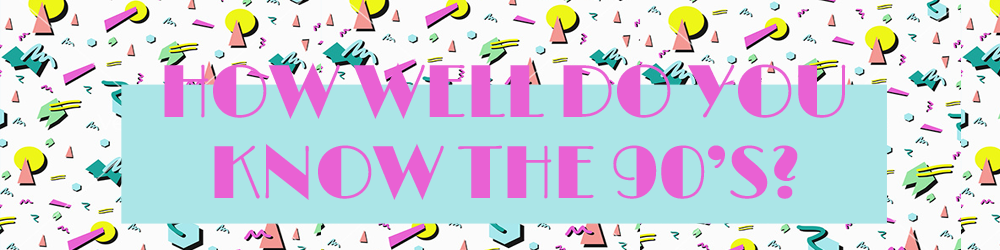
<style>
.page{position:relative;width:1000px;height:250px;background:#abe5e7}
.page>*{position:absolute;margin:0}
.t1{font:75px "Limelight";letter-spacing:-0.025em;color:#e961d3}
</style>
<div class="page">
<p class="t1" style="left:164px;top:62px;width:682px;height:57px">HOW WELL DO YOU</p>
<p class="t1" style="left:214px;top:143px;width:584px;height:57px">KNOW THE 90’S?</p>
</div>
